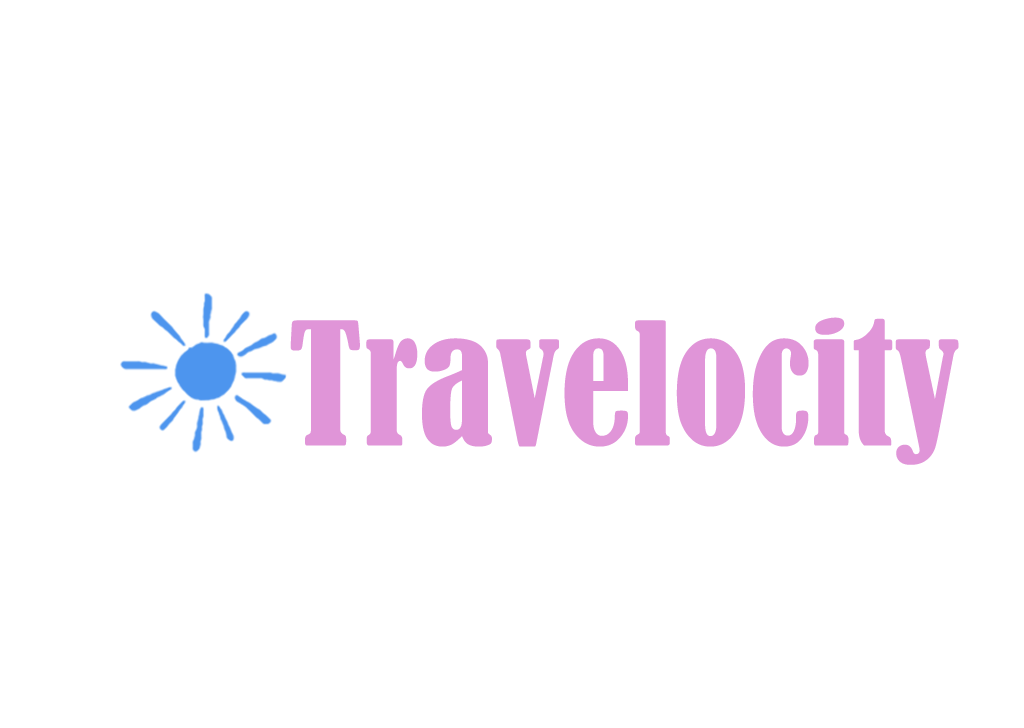
<style>
.page{position:relative;width:1024px;height:728px;background:#ffffff}
.page>*{position:absolute;margin:0}
.t1{font:158.6px "BernardMT-Condensed";color:#e095d8}
</style>
<div class="page">
<p class="t1" style="left:290px;top:317px;width:669px;height:148px">Travelocity</p>
</div>
